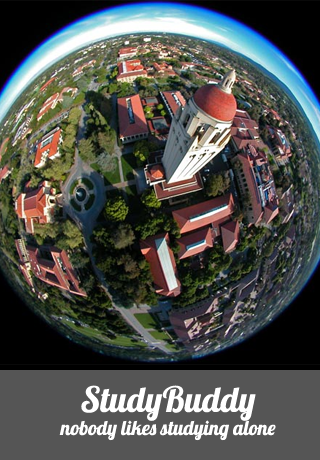
<style>
.page{position:relative;width:320px;height:460px}
.page>*{position:absolute;margin:0}
.t1{font:35px "Lobster1.4";color:#ffffff}
.t2{font:20px "Lobster1.4";color:#ffffff}
</style>
<div class="page">
<p class="t1" style="left:81px;top:385px;width:175px;height:36px">StudyBuddy</p>
<p class="t2" style="left:59px;top:420px;width:217px;height:21px">nobody likes studying alone</p>
</div>
